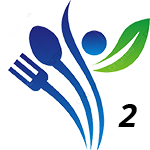
<style>
.page{position:relative;width:150px;height:150px;background:#ffffff}
.page>*{position:absolute;margin:0}
.t1{font:36px "Consolas-BoldItalic";color:#000000}
</style>
<div class="page">
<p class="t1" style="left:118px;top:104px;width:19px;height:23px">2</p>
</div>
